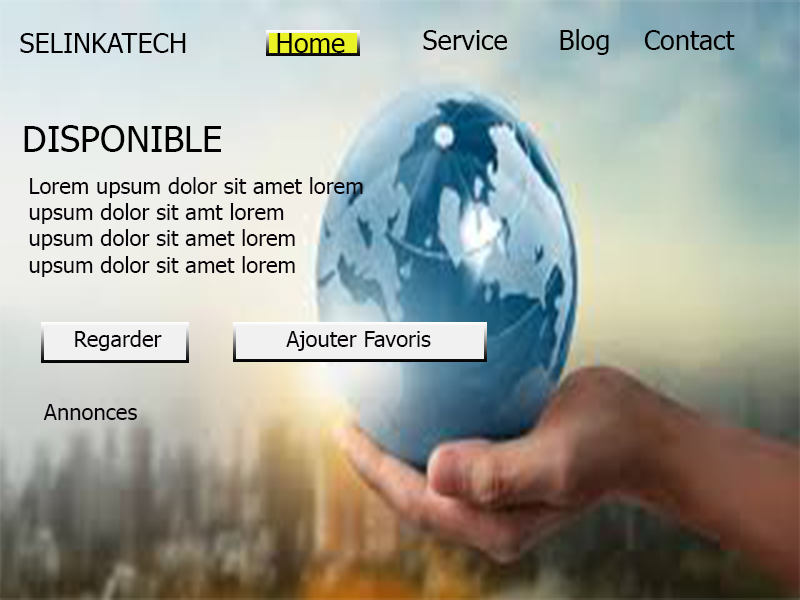
<style>
.page{position:relative;width:800px;height:600px}
.page>*{position:absolute;margin:0}
.t1{font:27px "Tahoma";color:#000000}
.t2{font:36px "Tahoma";color:#000000}
.t3{font:22px "Tahoma";color:#08040a}
</style>
<div class="page">
<p class="t1" style="left:423px;top:29px;width:312px;height:26px">Service      Blog    Contact</p>
<p class="t1" style="left:20px;top:33px;width:166px;height:20px">SELINKATECH</p>
<p class="t1" style="left:277px;top:33px;width:68px;height:20px">Home</p>
<p class="t2" style="left:24px;top:125px;width:197px;height:27px">DISPONIBLE</p>
<p class="t3" style="left:29px;top:177px;width:334px;height:100px">Lorem upsum dolor sit amet lorem<br>upsum dolor sit amt lorem <br>upsum dolor sit amet lorem<br>upsum dolor sit amet lorem</p>
<p class="t3" style="left:75px;top:330px;width:87px;height:21px">Regarder</p>
<p class="t3" style="left:286px;top:331px;width:145px;height:20px">Ajouter Favoris</p>
<p class="t3" style="left:43px;top:404px;width:94px;height:16px">Annonces</p>
</div>
